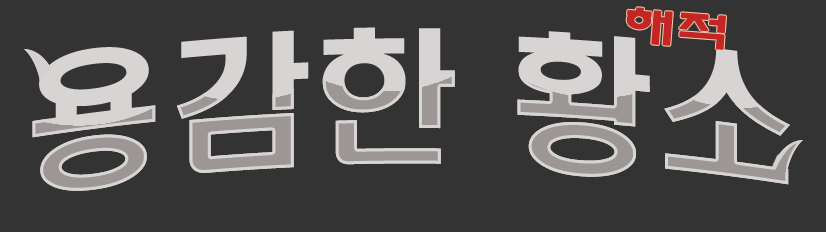
<style>
.page{position:relative;width:826px;height:232px;background:#333333}
.page>*{position:absolute;margin:0}
.t1{font:40px "ExpoM-HM";color:#c42525;font-weight:bold;scale:1.3 1}
.t2{font:146px "H2hdrM";color:#d7d4d3}
</style>
<div class="page">
<p class="t1" style="left:626px;top:7px;width:100px;height:43px;rotate:4deg">해적</p>
<p class="t2" style="left:32px;top:27px;width:758px;height:164px">용감한 황소</p>
</div>
